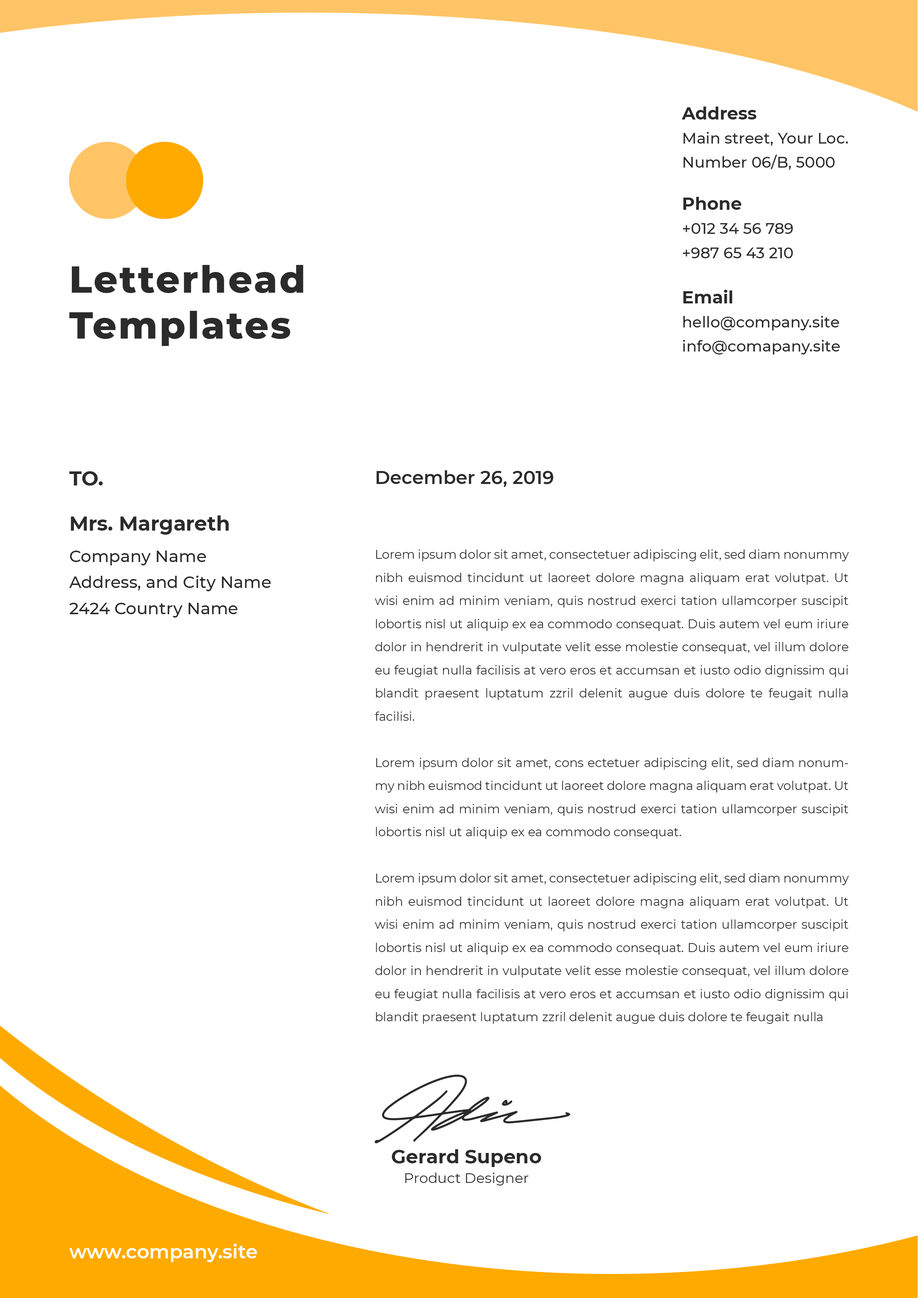
<style>
.page{position:relative;width:918px;height:1298px;background:#ffffff}
.page>*{position:absolute;margin:0}
.t1{font:15.4px/24.1px "Montserrat-Medium";color:#2b2b2b}
.t2{font:17.6px "Montserrat-Bold";color:#2b2b2b}
.t3{font:37.5px/45.6px "Montserrat-ExtraBold";letter-spacing:0.05em;color:#2b2b2b}
.t4{font:20.2px "Montserrat-Bold";color:#2b2b2b}
.t5{font:18.5px "Montserrat-SemiBold";color:#2b2b2b}
.t6{font:16.7px/26.2px "Montserrat-Medium";color:#2b2b2b}
.t7{font:12.3px/23.1px "Montserrat-Regular";color:#2b2b2b}
.t8{font:19.2px "Montserrat-Bold";color:#2b2b2b}
.t9{font:14.1px "Montserrat-Regular";color:#2b2b2b}
.t10{font:19.3px "Montserrat-SemiBold";color:#ffffff}
</style>
<div class="page">
<p class="t1" style="left:682px;top:107px;width:166px;height:248px"><span class="t2">Address<br></span>Main street, Your Loc.<br>Number 06/B, 5000<br><span class="t2"><br>Phone<br></span>+012 34 56 789<br>+987 65 43 210<br><br><span class="t2">Email<br></span>hello@company.site<br>info@comapany.site</p>
<p class="t3" style="left:69px;top:265px;width:235px;height:81px">Letterhead<br>Templates</p>
<p class="t4" style="left:69px;top:471px;width:34px;height:15px">TO.</p>
<p class="t5" style="left:376px;top:470px;width:178px;height:17px">December 26, 2019</p>
<p class="t4" style="left:71px;top:516px;width:158px;height:19px">Mrs. Margareth</p>
<p class="t6" style="left:69px;top:551px;width:202px;height:67px;text-align:justify">Company Name<br>Address, and City Name<br>2424 Country Name</p>
<p class="t7" style="left:375px;top:550px;width:474px;height:474px;text-align:justify">Lorem ipsum dolor sit amet, consectetuer adipiscing elit, sed diam nonummy nibh euismod tincidunt ut laoreet dolore magna aliquam erat volutpat. Ut wisi enim ad minim veniam, quis nostrud exerci tation ullamcorper suscipit lobortis nisl ut aliquip ex ea commodo consequat. Duis autem vel eum iriure dolor in hendrerit in vulputate velit esse molestie consequat, vel illum dolore eu feugiat nulla facilisis at vero eros et accumsan et iusto odio dignissim qui blandit praesent luptatum zzril delenit augue duis dolore te feugait nulla facilisi.<br><br>Lorem ipsum dolor sit amet, cons ectetuer adipiscing elit, sed diam nonummy nibh euismod tincidunt ut laoreet dolore magna aliquam erat volutpat. Ut wisi enim ad minim veniam, quis nostrud exerci tation ullamcorper suscipit lobortis nisl ut aliquip ex ea commodo consequat.<br><br>Lorem ipsum dolor sit amet, consectetuer adipiscing elit, sed diam nonummy nibh euismod tincidunt ut laoreet dolore magna aliquam erat volutpat. Ut wisi enim ad minim veniam, quis nostrud exerci tation ullamcorper suscipit lobortis nisl ut aliquip ex ea commodo consequat. Duis autem vel eum iriure dolor in hendrerit in vulputate velit esse molestie consequat, vel illum dolore eu feugiat nulla facilisis at vero eros et accumsan et iusto odio dignissim qui blandit praesent luptatum zzril delenit augue duis dolore te feugait nulla</p>
<p class="t8" style="left:392px;top:1150px;width:150px;height:17px">Gerard Supeno</p>
<p class="t9" style="left:405px;top:1173px;width:124px;height:13px">Product Designer</p>
<p class="t10" style="left:69px;top:1244px;width:188px;height:19px">www.company.site</p>
</div>
